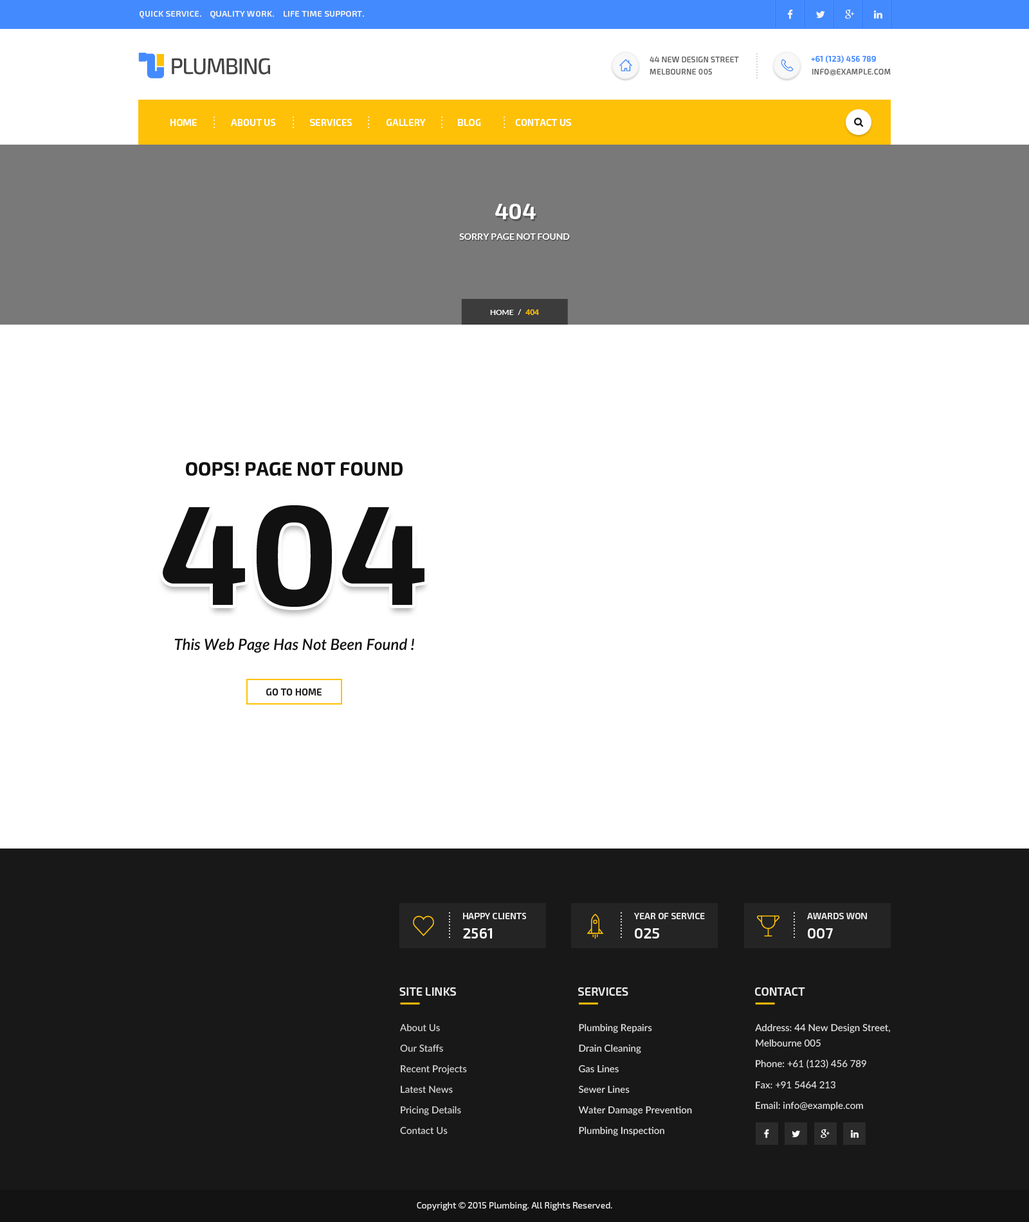
<style>
.page{position:relative;width:1029px;height:1222px;background:#ffffff}
.page>*{position:absolute;margin:0}
.t1{font:8.4px "Exo2.0-SemiBold";letter-spacing:0.03em;color:#eeeeee;text-transform:uppercase}
.t2{font:7.7px "Exo2.0-SemiBold";letter-spacing:0.1em;color:#cccccc;text-transform:uppercase}
.t3{font:7.7px/12.2px "Exo2.0-Medium";letter-spacing:0.03em;color:#666666;text-transform:uppercase}
.t4{font:7.7px "Exo2.0-SemiBold";letter-spacing:0.03em;color:#448aff;text-transform:uppercase}
.t5{font:7.7px "Exo2.0-Medium";letter-spacing:0.03em;color:#666666;text-transform:uppercase}
.t6{font:7.7px "Montserrat-Regular";letter-spacing:0.03em;color:#666666;text-transform:uppercase}
.t7{font:9.6px "Exo2.0-SemiBold";color:#ffffff;text-transform:uppercase}
.t8{font:7.7px "Exo2.0-SemiBold";letter-spacing:0.2em;color:#ffffff;text-transform:uppercase}
.t9{font:21.9px "Exo2.0-Bold";color:#ffffff;text-transform:uppercase}
.t10{font:9px "Lato-Bold";color:#ffffff;text-transform:uppercase}
.t11{font:7.7px "Lato-Bold";color:#ffffff;text-transform:uppercase}
.t12{font:7.7px "Lato-Heavy";color:#ffc107;text-transform:uppercase}
.t13{font:19.3px "Exo2.0-Bold";color:#111111;text-transform:uppercase}
.t14{font:141.4px "Exo2.0-Bold";color:#111111}
.t15{font:15.4px "Lato-SemiboldItalic";color:#111111}
.t16{font:9.6px "Exo2.0-SemiBold";color:#232323;text-transform:uppercase}
.t17{font:7.7px "Exo2.0-SemiBold";letter-spacing:0.15em;color:#ffffff;text-transform:uppercase}
.t18{font:9px "Exo2.0-SemiBold";color:#e8e8e8;text-transform:uppercase}
.t19{font:14.8px "Exo2.0-SemiBold";color:#ffffff;text-transform:uppercase}
.t20{font:11.6px "Exo2.0-SemiBold";color:#e8e8e8;text-transform:uppercase}
.t21{font:9.6px/20.6px "Lato-Medium";color:#dadada}
.t22{font:9.6px/20.6px "Lato-Medium";color:#e8e8e8}
.t23{font:9.6px/15.4px "Lato-Medium";color:#e8e8e8}
.t24{font:9.6px "Lato-Medium";color:#e8e8e8}
.t25{font:9px "Exo2.0-Regular";color:#e8e8e8}
</style>
<div class="page">
<p class="t1" style="left:140px;top:11px;width:224px;height:8px">Quick Service.    Quality Work.    life time support.</p>
<p class="t2" style="left:756px;top:53px;width:1px;height:25px;rotate:90deg">..........</p>
<p class="t3" style="left:649px;top:57px;width:90px;height:18px">44 new design street<br>melbourne 005</p>
<p class="t4" style="left:811px;top:55px;width:65px;height:8px">+61 (123) 456 789</p>
<p class="t5" style="left:812px;top:69px;width:78px;height:7px">info<span class="t6">@</span>example.com</p>
<p class="t7" style="left:170px;top:119px;width:401px;height:7px">Home                About Us                Services                gALLERY               Blog                Contact us</p>
<p class="t8" style="left:213px;top:116px;width:2px;height:12px;rotate:-90deg">....</p>
<p class="t8" style="left:292px;top:116px;width:2px;height:12px;rotate:-90deg">....</p>
<p class="t8" style="left:368px;top:116px;width:1px;height:12px;rotate:-90deg">....</p>
<p class="t8" style="left:441px;top:116px;width:1px;height:12px;rotate:-90deg">....</p>
<p class="t8" style="left:503px;top:116px;width:2px;height:12px;rotate:-90deg">....</p>
<p class="t9" style="left:495px;top:204px;width:41px;height:15px">404</p>
<p class="t10" style="left:459px;top:233px;width:111px;height:7px">sorry page not found</p>
<p class="t11" style="left:490px;top:309px;width:49px;height:7px">home   /   <span class="t12">404</span></p>
<p class="t13" style="left:186px;top:462px;width:216px;height:14px">oops! Page Not Found</p>
<p class="t14" style="left:163px;top:505px;width:261px;height:102px">404</p>
<p class="t15" style="left:174px;top:638px;width:240px;height:15px">This Web Page Has Not Been Found !</p>
<p class="t16" style="left:266px;top:688px;width:55px;height:8px">Go to Home</p>
<p class="t17" style="left:449px;top:912px;width:1px;height:26px;rotate:90deg">.........</p>
<p class="t18" style="left:463px;top:913px;width:63px;height:6px">happy clients</p>
<p class="t17" style="left:620px;top:912px;width:2px;height:26px;rotate:90deg">.........</p>
<p class="t18" style="left:634px;top:913px;width:71px;height:6px">year of service</p>
<p class="t17" style="left:793px;top:912px;width:2px;height:26px;rotate:90deg">.........</p>
<p class="t18" style="left:807px;top:913px;width:60px;height:6px">awards won</p>
<p class="t19" style="left:463px;top:928px;width:29px;height:11px">2561</p>
<p class="t19" style="left:634px;top:928px;width:25px;height:11px">025</p>
<p class="t19" style="left:807px;top:928px;width:26px;height:11px">007</p>
<p class="t20" style="left:399px;top:987px;width:57px;height:9px">site links</p>
<p class="t20" style="left:578px;top:987px;width:50px;height:9px">services</p>
<p class="t20" style="left:755px;top:987px;width:50px;height:9px">Contact</p>
<p class="t21" style="left:400px;top:1024px;width:67px;height:111px">About Us<br>Our Staffs     <br>Recent Projects       <br>Latest News         <br>Pricing Details<br>Contact Us</p>
<p class="t22" style="left:578px;top:1023px;width:114px;height:113px">Plumbing Repairs<br>Drain Cleaning<br>Gas Lines<br>Sewer Lines<br>Water Damage Prevention<br>Plumbing Inspection</p>
<p class="t23" style="left:755px;top:1023px;width:135px;height:24px">Address: 44 New Design Street,<br>Melbourne 005</p>
<p class="t24" style="left:755px;top:1059px;width:111px;height:10px">Phone: +61 (123) 456 789</p>
<p class="t24" style="left:755px;top:1081px;width:80px;height:8px">Fax: +91 5464 213</p>
<p class="t24" style="left:755px;top:1101px;width:108px;height:10px">Email: info@example.com</p>
<p class="t25" style="left:417px;top:1202px;width:195px;height:8px">Copyright © 2015 Plumbing. All Rights Reserved.</p>
</div>
